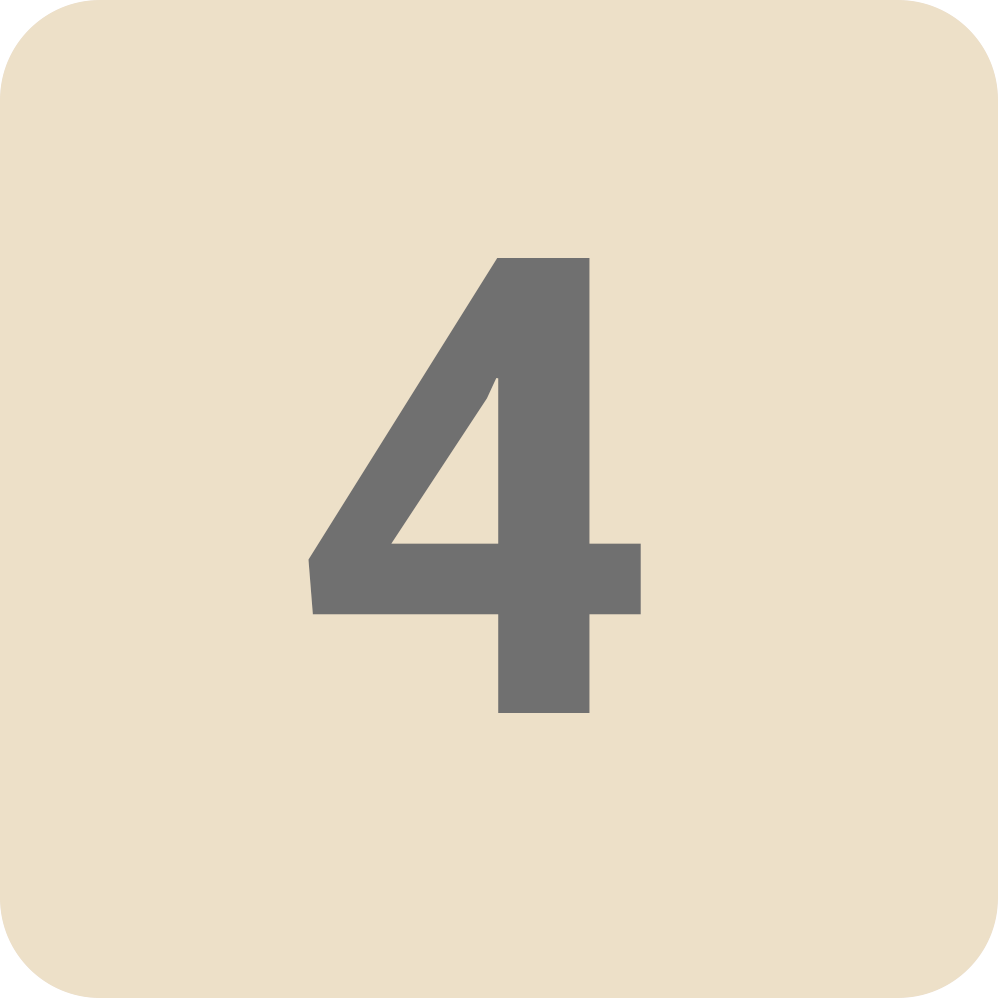
<style>
.page{position:relative;width:998px;height:998px;background:#ede0c8}
.page>*{position:absolute;margin:0}
.t1{font:640px "Roboto-Bold";color:#707070}
</style>
<div class="page">
<p class="t1" style="left:308px;top:258px;width:333px;height:455px">4</p>
</div>
